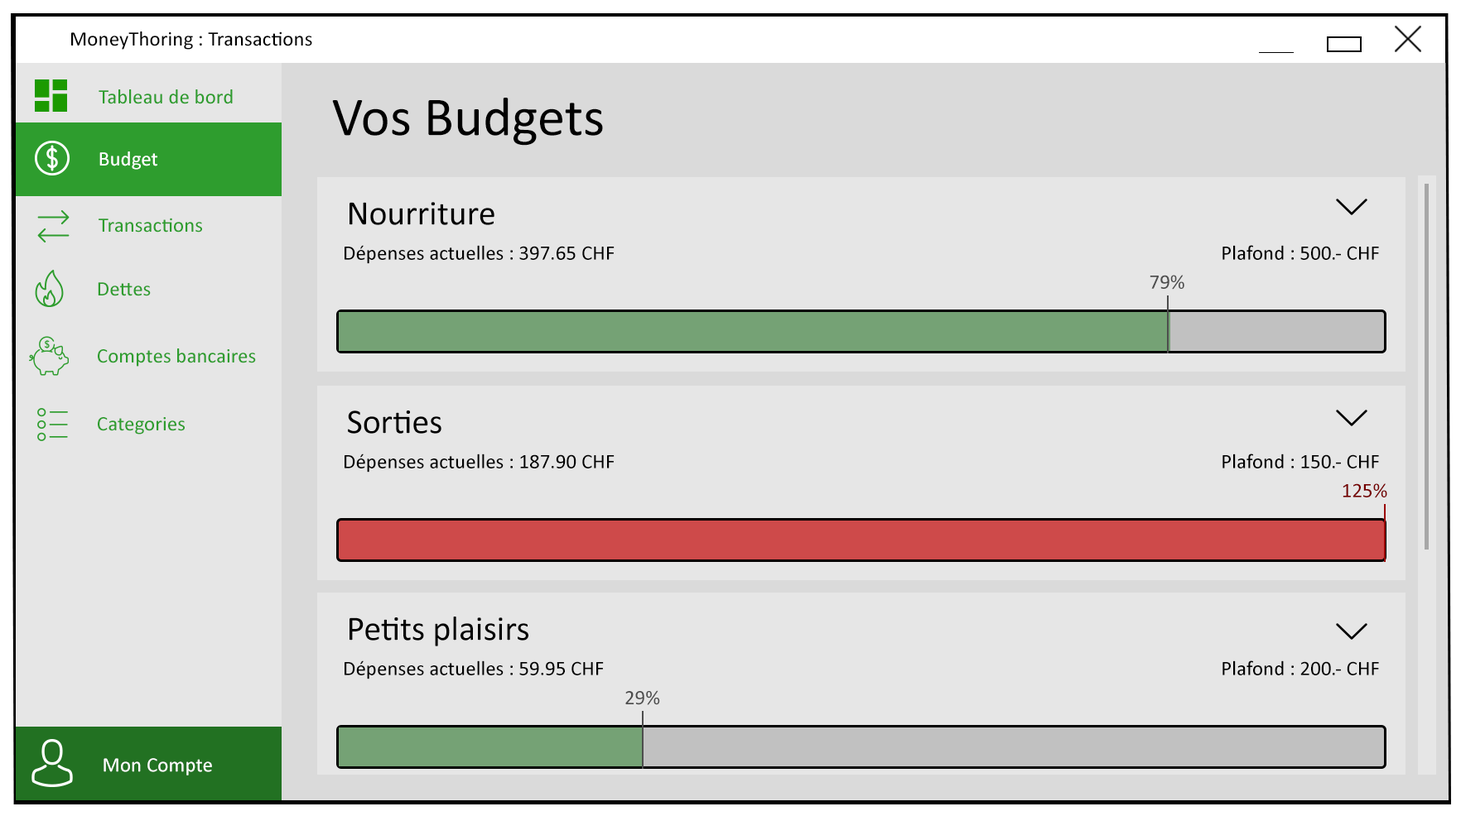
<style>
.page{position:relative;width:1461px;height:816px;background:#e6e6e6}
.page>*{position:absolute;margin:0}
.t1{font:20.7px "Calibri";color:#010101}
.t2{font:20.7px "Calibri";color:#2e9d2e}
.t3{font:55.2px "Calibri";color:#000000}
.t4{font:20.7px "Calibri";color:#ffffff}
.t5{font:34.5px "Calibri";color:#000000}
.t6{font:20.7px "Calibri";color:#000000}
.t7{font:20.7px "Calibri";color:#4d4d4d}
.t8{font:20.7px "Calibri";color:#760000}
.t9{font:20.6px "Calibri";color:#4d4d4d}
</style>
<div class="page">
<p class="t1" style="left:71px;top:31px;width:241px;height:19px">MoneyThoring : Transactions</p>
<p class="t2" style="left:99px;top:89px;width:134px;height:15px">Tableau de bord</p>
<p class="t3" style="left:332px;top:98px;width:271px;height:48px">Vos Budgets</p>
<p class="t4" style="left:99px;top:152px;width:58px;height:18px">Budget</p>
<p class="t5" style="left:349px;top:202px;width:145px;height:23px">Nourriture</p>
<p class="t2" style="left:99px;top:218px;width:103px;height:15px">Transactions</p>
<p class="t6" style="left:344px;top:245px;width:270px;height:19px">Dépenses actuelles : 397.65  CHF</p>
<p class="t6" style="left:1222px;top:245px;width:157px;height:15px">Plafond : 500.- CHF</p>
<p class="t7" style="left:1149px;top:275px;width:35px;height:15px">79%</p>
<p class="t2" style="left:98px;top:282px;width:53px;height:14px">Dettes</p>
<p class="t2" style="left:98px;top:349px;width:158px;height:18px">Comptes bancaires</p>
<p class="t5" style="left:348px;top:411px;width:93px;height:23px">Sorties</p>
<p class="t2" style="left:98px;top:417px;width:87px;height:18px">Categories</p>
<p class="t6" style="left:344px;top:454px;width:270px;height:19px">Dépenses actuelles : 187.90  CHF</p>
<p class="t6" style="left:1222px;top:454px;width:157px;height:15px">Plafond : 150.- CHF</p>
<p class="t8" style="left:1342px;top:484px;width:45px;height:14px">125%</p>
<p class="t5" style="left:349px;top:617px;width:179px;height:30px">Petits plaisirs</p>
<p class="t6" style="left:344px;top:661px;width:260px;height:19px">Dépenses actuelles : 59.95 CHF</p>
<p class="t6" style="left:1222px;top:661px;width:157px;height:15px">Plafond : 200.- CHF</p>
<p class="t9" style="left:625px;top:691px;width:35px;height:14px">29%</p>
<p class="t4" style="left:103px;top:758px;width:109px;height:18px">Mon Compte</p>
</div>
